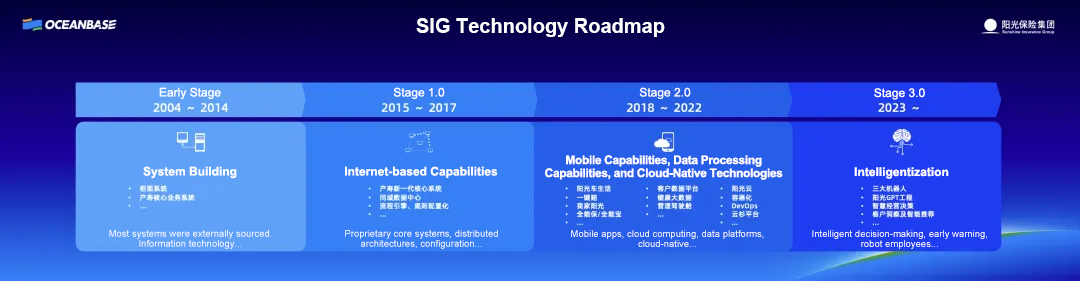
<style>
.page{position:relative;width:1080px;height:281px}
.page>*{position:absolute;margin:0}
.t1{font:20px "Arial-BoldMT";color:#ffffff}
.t2{font:12px "ArialMT";color:#ffffff}
.t3{font:12px/13px "Arial-BoldMT";letter-spacing:-0.03em;color:#ffffff}
.t4{font:12px "Arial-BoldMT";color:#ffffff}
.t5{font:9.5px/10px "ArialMT";color:#ffffff}
</style>
<div class="page">
<p class="t1" style="left:416px;top:18px;width:249px;height:19px">SIG Technology Roadmap</p>
<p class="t2" style="left:159px;top:87px;width:62px;height:13px">Early Stage</p>
<p class="t2" style="left:393px;top:87px;width:52px;height:13px">Stage 1.0</p>
<p class="t2" style="left:639px;top:87px;width:52px;height:13px">Stage 2.0</p>
<p class="t2" style="left:874px;top:88px;width:51px;height:12px">Stage 3.0</p>
<p class="t3" style="left:545px;top:155px;width:238px;height:25px;text-align:center">Mobile Capabilities, Data Processing Capabilities, and Cloud-Native Technologies</p>
<p class="t4" style="left:143px;top:166px;width:94px;height:13px">System Building</p>
<p class="t4" style="left:345px;top:166px;width:153px;height:12px">Internet-based Capabilities</p>
<p class="t4" style="left:854px;top:167px;width:95px;height:12px">Intelligentization</p>
<p class="t5" style="left:109px;top:230px;width:163px;height:19px;text-align:center">Most systems were externally sourced. Information technology...</p>
<p class="t5" style="left:345px;top:230px;width:153px;height:19px;text-align:center">Proprietary core systems, distributed architectures, configuration...</p>
<p class="t5" style="left:571px;top:230px;width:193px;height:17px;text-align:center">Mobile apps, cloud computing, data platforms, cloud-native...</p>
<p class="t5" style="left:812px;top:230px;width:175px;height:19px;text-align:center">Intelligent decision-making, early warning, robot employees...</p>
</div>
